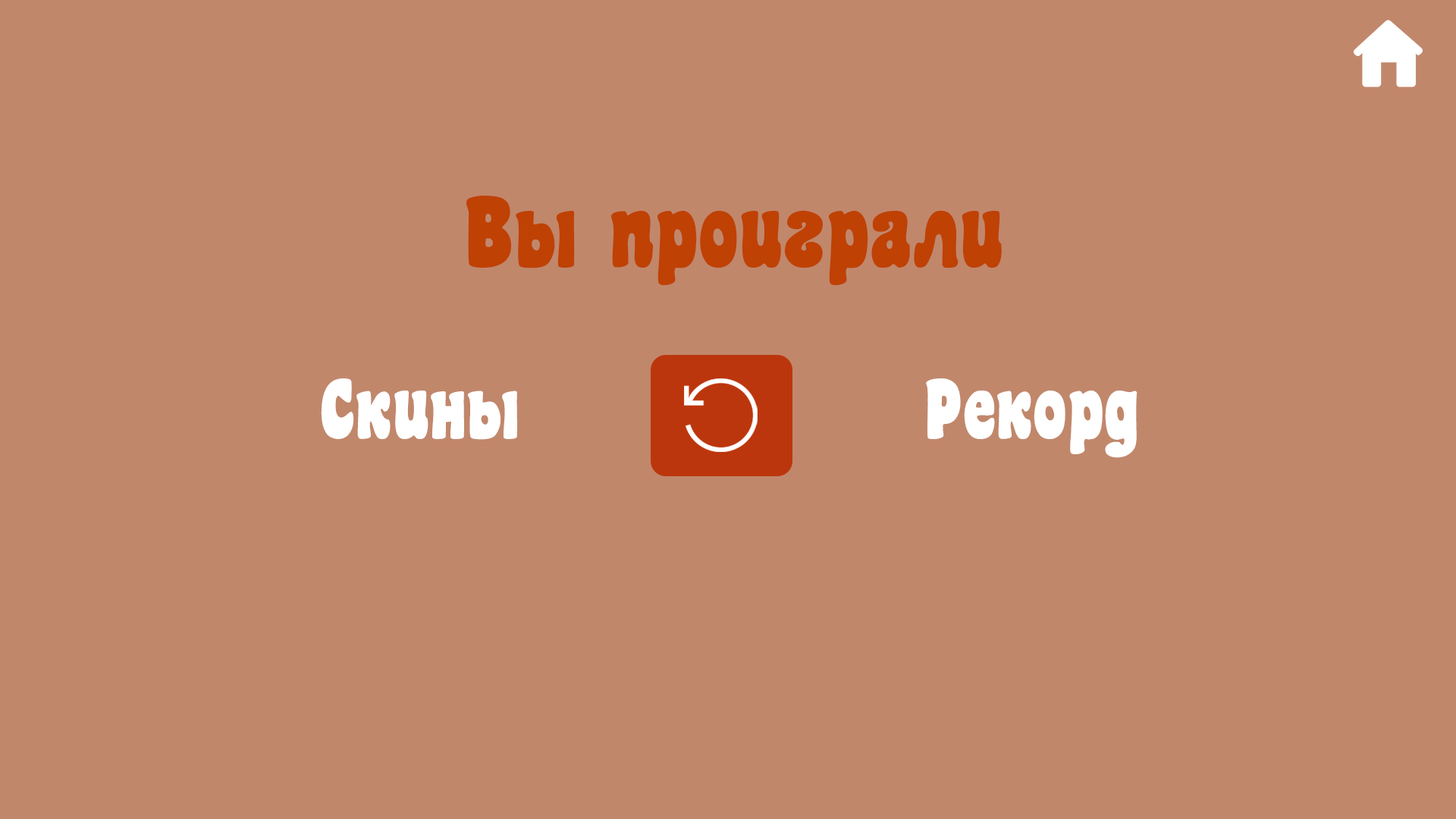
<style>
.page{position:relative;width:1456px;height:819px;background:#c1876b}
.page>*{position:absolute;margin:0}
.t1{font:89.7px "mr_CoasterG-Black";letter-spacing:0.005em;color:#bf4104}
.t2{font:75.8px "mr_CoasterG-Black";letter-spacing:0.005em;color:#ffffff}
</style>
<div class="page">
<p class="t1" style="left:466px;top:196px;width:536px;height:89px">Вы проиграли</p>
<p class="t2" style="left:321px;top:378px;width:196px;height:62px">Скины</p>
<p class="t2" style="left:926px;top:378px;width:211px;height:80px">Рекорд</p>
</div>
